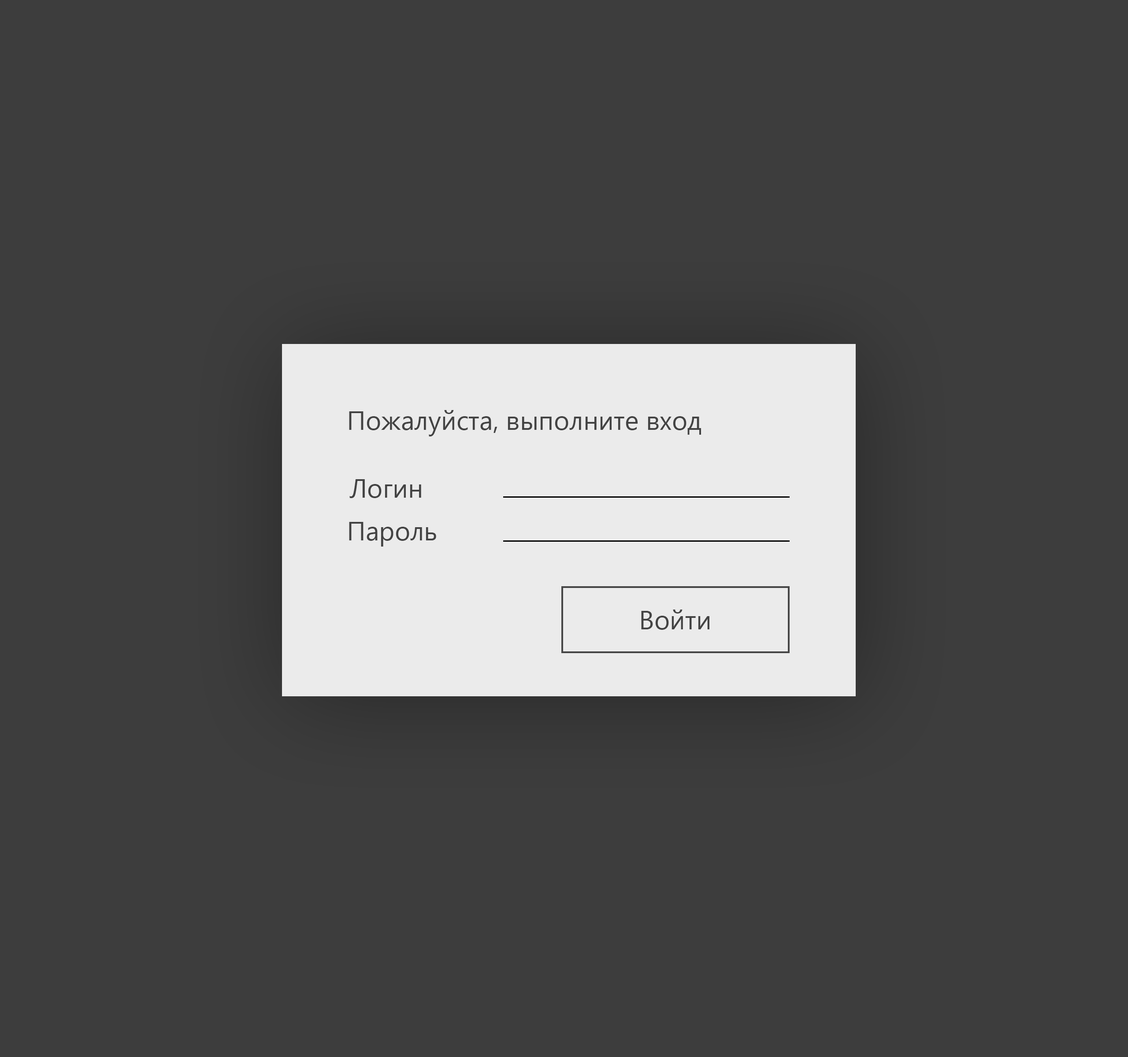
<style>
.page{position:relative;width:1128px;height:1057px;background:#3d3d3d}
.page>*{position:absolute;margin:0}
.t1{font:26.4px "SegoeUI";color:#434343}
</style>
<div class="page">
<p class="t1" style="left:349px;top:410px;width:352px;height:27px">Пожалуйста, выполните вход</p>
<p class="t1" style="left:349px;top:479px;width:72px;height:19px">Логин</p>
<p class="t1" style="left:349px;top:522px;width:87px;height:25px">Пароль</p>
<p class="t1" style="left:641px;top:610px;width:68px;height:20px">Войти</p>
</div>
